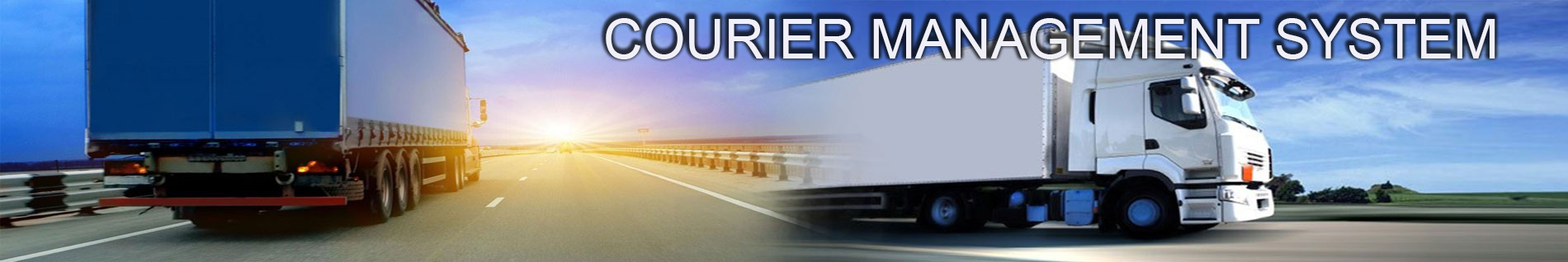
<style>
.page{position:relative;width:1568px;height:262px}
.page>*{position:absolute;margin:0}
.t1{font:54.5px "ArialMT";color:#f1f0f8}
</style>
<div class="page">
<p class="t1" style="left:606px;top:18px;width:889px;height:41px">COURIER MANAGEMENT SYSTEM</p>
</div>
